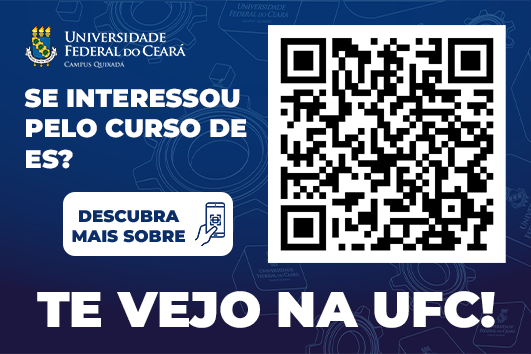
<style>
.page{position:relative;width:531px;height:354px;background:#ffffff}
.page>*{position:absolute;margin:0}
.t1{font:25.5px "Montserrat-Black";color:#ffffff;text-transform:uppercase}
.t2{font:16.9px "Montserrat-Black";color:#0b2e68;text-transform:uppercase}
.t3{font:50px "Montserrat-Black";color:#ffffff;text-transform:uppercase}
</style>
<div class="page">
<p class="t1" style="left:24px;top:88px;width:223px;height:81px">sE Interessou <br>pelo Curso de <br>ES?</p>
<p class="t2" style="left:72px;top:210px;width:113px;height:33px;text-align:center">Descubra<br>mais sobre</p>
<p class="t3" style="left:37px;top:291px;width:458px;height:37px">te vejo na ufc!</p>
</div>
